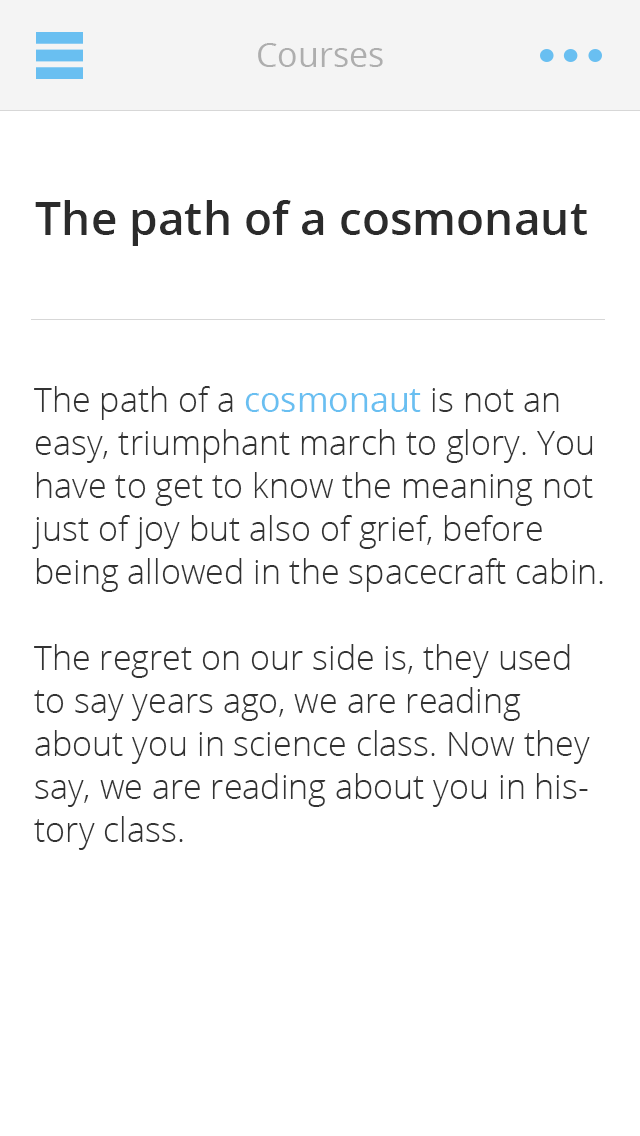
<style>
.page{position:relative;width:640px;height:1136px;background:#ffffff}
.page>*{position:absolute;margin:0}
.t1{font:34px "OpenSans";color:#aeaeae}
.t2{font:46px "OpenSans-Semibold";color:#2b2b2b}
.t3{font:34px/43px "OpenSans-Light";color:#333333}
.t4{font:34px/43px "OpenSans";color:#69bff1}
</style>
<div class="page">
<p class="t1" style="left:258px;top:43px;width:125px;height:24px">Courses</p>
<p class="t2" style="left:35px;top:200px;width:552px;height:46px">The path of a cosmonaut</p>
<p class="t3" style="left:32px;top:386px;width:571px;height:464px">The path of a <span class="t4">cosmonaut </span>is not an easy, triumphant march to glory. You have to get to know the meaning not just of joy but also of grief, before being allowed in the spacecraft cabin.<br><br>The regret on our side is, they used to say years ago, we are reading about you in science class. Now they say, we are reading about you in history class.<br><br>A Chinese tale tells of some men sent to harm a young girl who, upon seeing her beauty, become her protectors rather than her violators. That's how I felt seeing the Earth<br>for the first time. I could not help but love and cherish her.</p>
</div>
